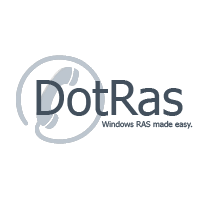
<style>
.page{position:relative;width:200px;height:200px;background:#ffffff}
.page>*{position:absolute;margin:0}
.t1{font:48px "Tahoma";color:#43505d}
.t2{font:8px "Tahoma";color:#43505d}
</style>
<div class="page">
<p class="t1" style="left:36px;top:80px;width:147px;height:36px">DotRas</p>
<p class="t2" style="left:101px;top:120px;width:92px;height:9px">Windows RAS made easy.</p>
</div>
